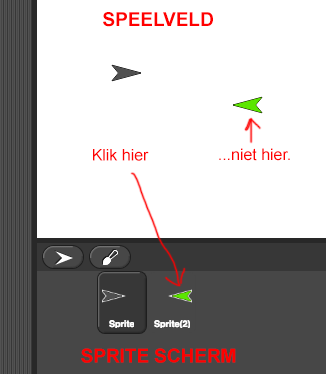
<style>
.page{position:relative;width:326px;height:374px;background:#ffffff}
.page>*{position:absolute;margin:0}
.t1{font:18.9px "Arial-BoldMT";color:#fe0000}
.t2{font:15.9px "ArialMT";color:#fe0000}
</style>
<div class="page">
<p class="t1" style="left:103px;top:12px;width:110px;height:15px">SPEELVELD</p>
<p class="t2" style="left:93px;top:149px;width:56px;height:12px">Klik hier</p>
<p class="t2" style="left:219px;top:148px;width:71px;height:13px">...niet hier.</p>
<p class="t1" style="left:81px;top:348px;width:155px;height:15px">SPRITE SCHERM</p>
</div>
